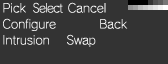
<style>
.page{position:relative;width:168px;height:64px;background:#333333}
.page>*{position:absolute;margin:0}
.t1{font:12px/16px "RodinNTLGPro-L";color:#ffffff}
.t2{font:12px/16px "RodinNTLGPro-L";letter-spacing:-0.06em;color:#ffffff;scale:0.9 1}
.t3{font:12px/16px "RodinNTLGPro-L";letter-spacing:-0.06em;color:#ffffff}
.t4{font:12px/16px "RodinNTLGPro-L";letter-spacing:-0.025em;color:#ffffff}
</style>
<div class="page">
<p class="t1" style="left:3px;top:2px;width:125px;height:45px">Pick  <span class="t2">S</span><span class="t3">elect  </span>Cancel<br>Configure            Back<br>Intrusion    <span class="t4">Swap</span></p>
</div>
